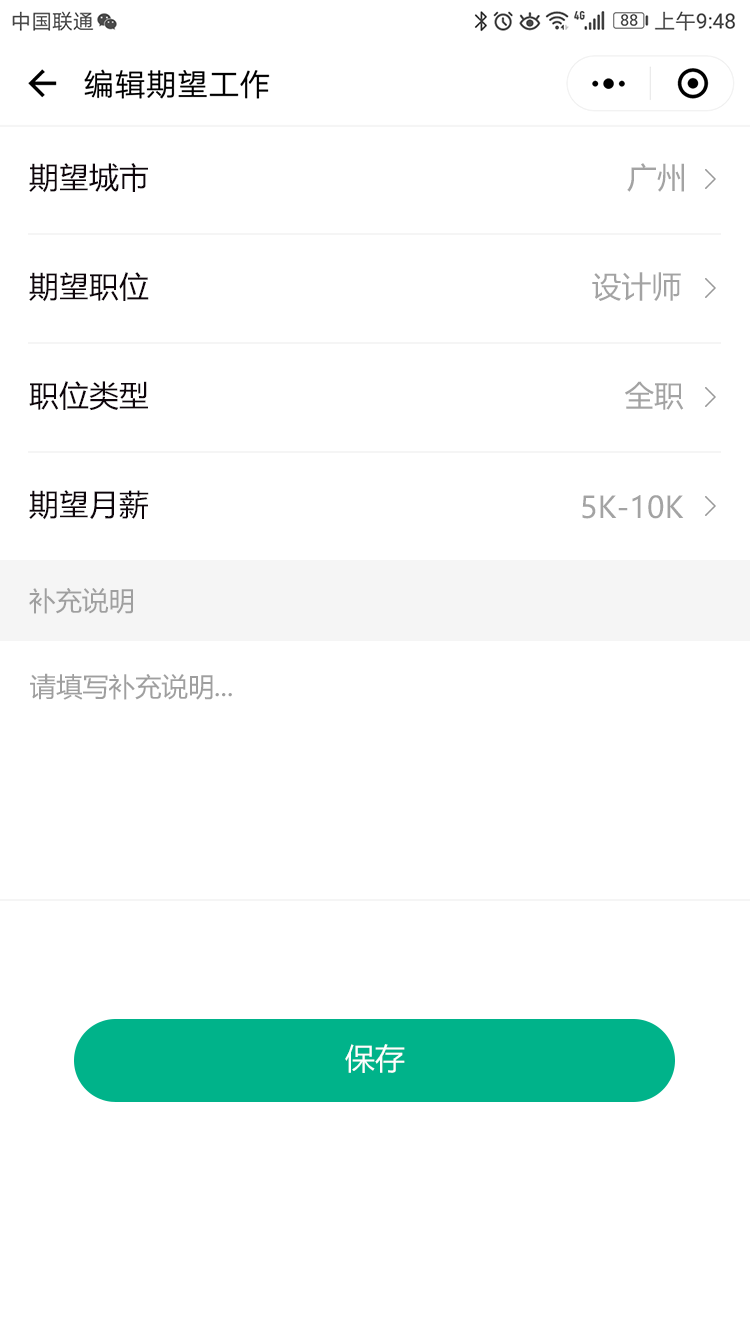
<style>
.page{position:relative;width:750px;height:1333px;background:#ffffff}
.page>*{position:absolute;margin:0}
.t1{font:29.9px "MicrosoftYaHei";color:#000000}
.t2{font:29.9px "MicrosoftYaHei";color:#a3a3a3}
.t3{font:26.4px "MicrosoftYaHei";color:#9f9f9f}
.t4{font:29.9px "MicrosoftYaHei";color:#ffffff}
</style>
<div class="page">
<p class="t1" style="left:29px;top:163px;width:119px;height:30px">期望城市</p>
<p class="t2" style="left:627px;top:163px;width:57px;height:29px">广州</p>
<p class="t1" style="left:29px;top:272px;width:120px;height:30px">期望职位</p>
<p class="t2" style="left:592px;top:272px;width:89px;height:29px">设计师</p>
<p class="t1" style="left:29px;top:381px;width:119px;height:30px">职位类型</p>
<p class="t2" style="left:625px;top:381px;width:59px;height:29px">全职</p>
<p class="t1" style="left:29px;top:490px;width:120px;height:30px">期望月薪</p>
<p class="t2" style="left:582px;top:495px;width:102px;height:24px">5K-10K</p>
<p class="t3" style="left:29px;top:588px;width:104px;height:26px">补充说明</p>
<p class="t3" style="left:30px;top:673px;width:202px;height:27px">请填写补充说明...</p>
<p class="t4" style="left:345px;top:1044px;width:60px;height:29px">保存</p>
</div>
